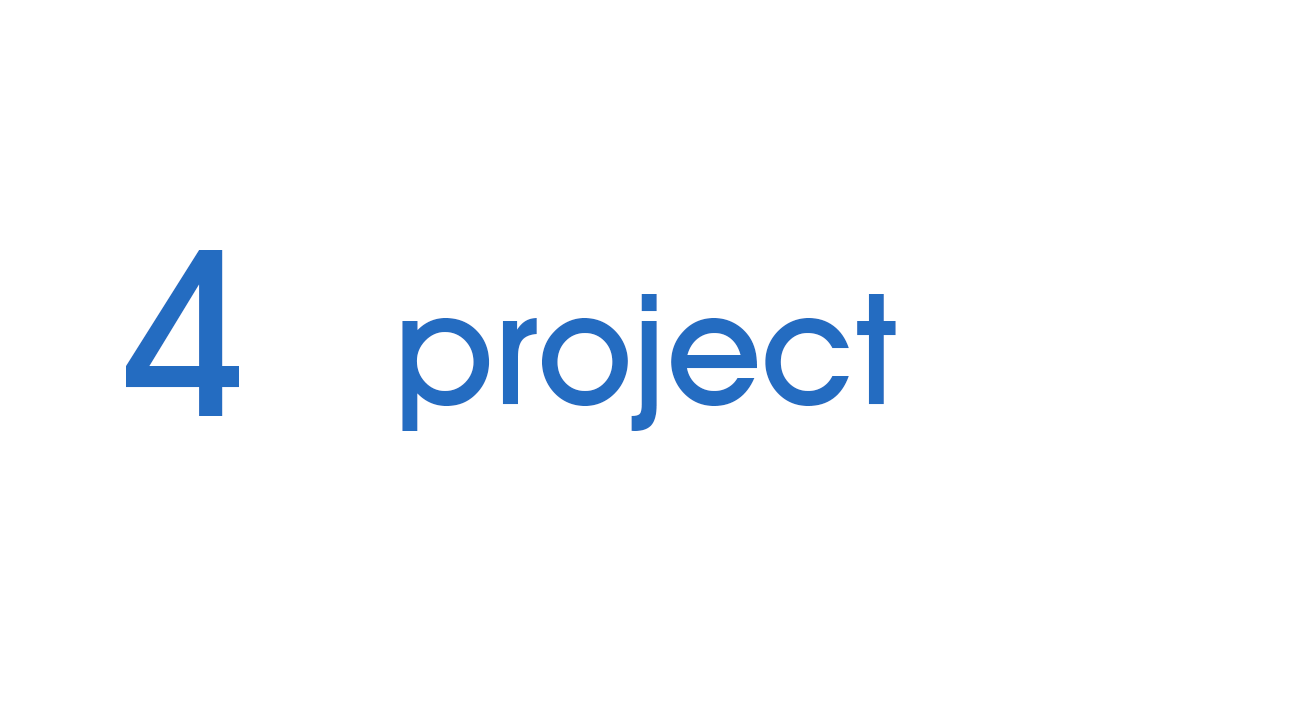
<style>
.page{position:relative;width:1291px;height:713px;background:#ffffff}
.page>*{position:absolute;margin:0}
.t1{font:233.5px "AvantGardeITCbyBT-Medium";color:#246cc1}
.t2{font:154.9px "AvantGardeITCbyBT-Medium";color:#246cc1}
</style>
<div class="page">
<p class="t1" style="left:126px;top:250px;width:113px;height:166px">4</p>
<p class="t2" style="left:402px;top:294px;width:494px;height:137px">project</p>
</div>
